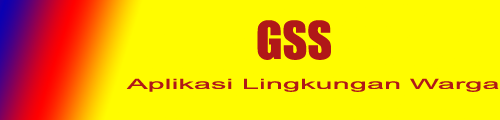
<style>
.page{position:relative;width:500px;height:120px;background:#fffc00}
.page>*{position:absolute;margin:0}
.t1{font:48px "Impact";color:#b01818}
.t2{font:14px "ArialMT";color:#b01818;scale:2.2 1}
</style>
<div class="page">
<p class="t1" style="left:257px;top:20px;width:74px;height:40px">GSS</p>
<p class="t2" style="left:126px;top:78px;width:373px;height:14px">Aplikasi Lingkungan Warga</p>
</div>
